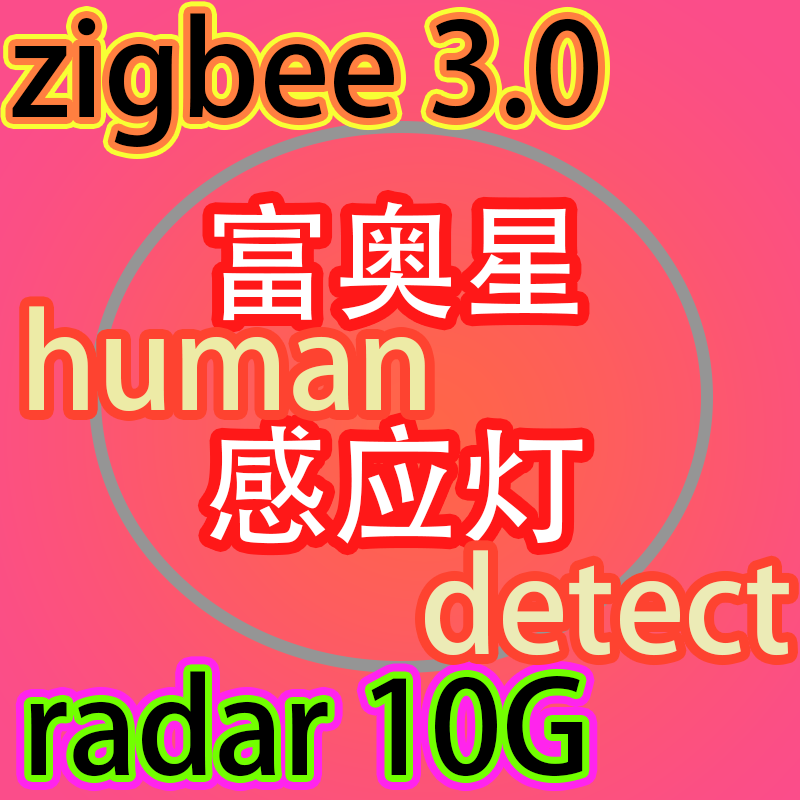
<style>
.page{position:relative;width:800px;height:800px}
.page>*{position:absolute;margin:0}
.t1{font:128px "AdobeHeitiStd-Regular";color:#000000}
.t2{font:128px "AdobeHeitiStd-Regular";color:#ffffff}
.t3{font:128px "AdobeHeitiStd-Regular";color:#edeba6}
.t4{font:128px "AdobeHeitiStd-Regular";color:#ecebb6}
</style>
<div class="page">
<p class="t1" style="left:12px;top:13px;width:586px;height:134px">zigbee 3.0</p>
<p class="t2" style="left:209px;top:201px;width:374px;height:343px">富奥星<br>感应灯</p>
<p class="t3" style="left:29px;top:306px;width:396px;height:106px">human</p>
<p class="t4" style="left:425px;top:550px;width:364px;height:106px">detect</p>
<p class="t1" style="left:30px;top:671px;width:553px;height:106px">radar 10G</p>
</div>
